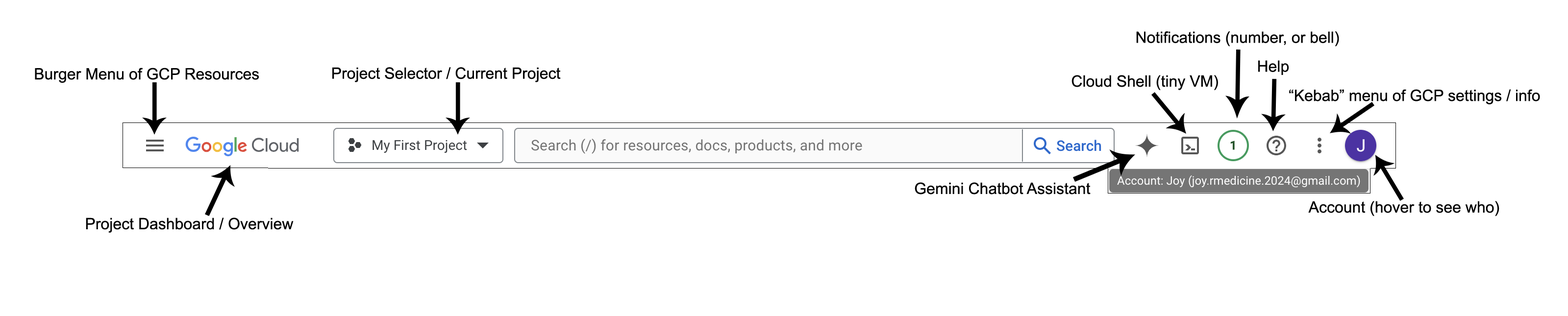
<style>
.page{position:relative;width:1568px;height:316px;background:#ffffff}
.page>*{position:absolute;margin:0}
.t1{font:15.7px "ArialMT";color:#000000}
</style>
<div class="page">
<p class="t1" style="left:1136px;top:31px;width:203px;height:16px">Notifications (number, or bell)</p>
<p class="t1" style="left:1258px;top:60px;width:31px;height:15px">Help</p>
<p class="t1" style="left:35px;top:68px;width:224px;height:15px">Burger Menu of GCP Resources</p>
<p class="t1" style="left:332px;top:67px;width:229px;height:15px">Project Selector / Current Project</p>
<p class="t1" style="left:1071px;top:75px;width:147px;height:15px">Cloud Shell (tiny VM)</p>
<p class="t1" style="left:1289px;top:89px;width:251px;height:15px">“Kebab” menu of GCP settings / info</p>
<p class="t1" style="left:915px;top:182px;width:176px;height:13px">Gemini Chatbot Assistant</p>
<p class="t1" style="left:1308px;top:201px;width:191px;height:15px">Account (hover to see who)</p>
<p class="t1" style="left:86px;top:218px;width:208px;height:15px">Project Dashboard / Overview</p>
</div>
